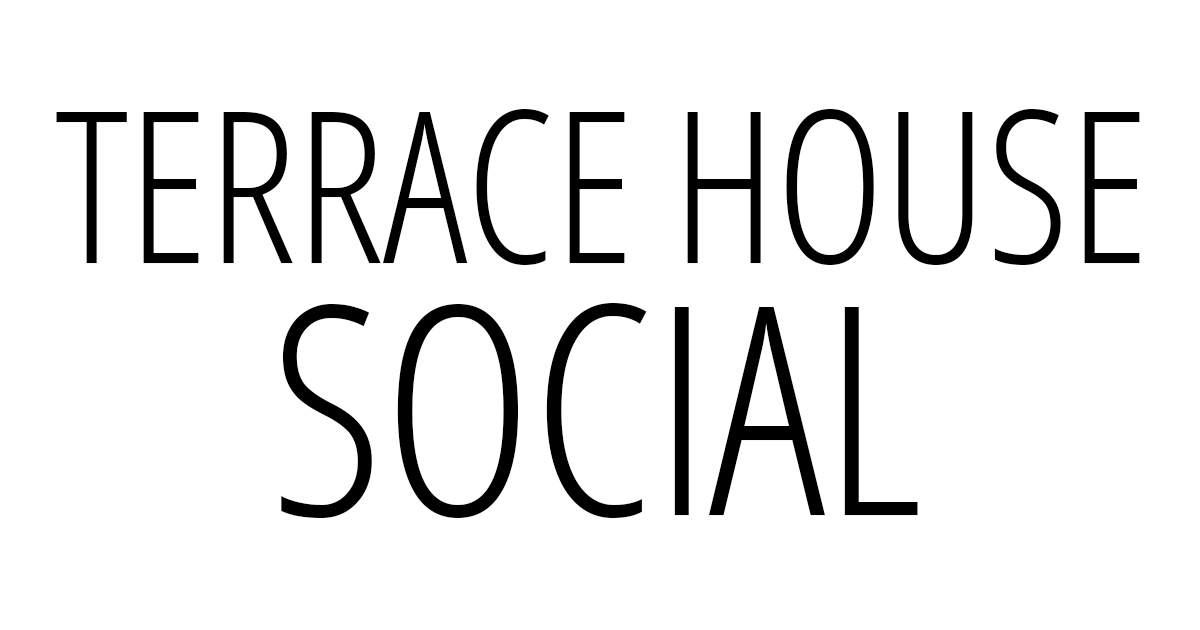
<style>
.page{position:relative;width:1200px;height:630px;background:#ffffff}
.page>*{position:absolute;margin:0}
.t1{font:212px "OpenSansCondensed-Light";letter-spacing:-0.009em;color:#000000}
.t2{font:292px "OpenSansCondensed-Light";letter-spacing:-0.009em;color:#000000}
</style>
<div class="page">
<p class="t1" style="left:56px;top:109px;width:1084px;height:156px">TERRACE HOUSE</p>
<p class="t2" style="left:281px;top:303px;width:637px;height:215px">SOCIAL</p>
</div>
